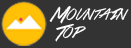
<style>
.page{position:relative;width:131px;height:48px;background:#333333}
.page>*{position:absolute;margin:0}
.t1{font:16.7px/17.8px "ColorsOfAutumn";color:#ffffff}
</style>
<div class="page">
<p class="t1" style="left:49px;top:6px;width:80px;height:36px">Mountain<br>Top</p>
</div>
